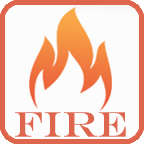
<style>
.page{position:relative;width:144px;height:144px;background:#fdfcfc}
.page>*{position:absolute;margin:0}
.t1{font:35.6px "EngraversMT";letter-spacing:0.001em;color:#de664c;text-transform:uppercase}
</style>
<div class="page">
<p class="t1" style="left:15px;top:112px;width:111px;height:25px">Fire</p>
</div>
